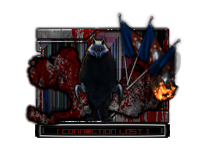
<style>
.page{position:relative;width:205px;height:147px;background:#ffffff}
.page>*{position:absolute;margin:0}
.t1{font:10.6px "P22DeStijlRegular";color:#620b0c}
</style>
<div class="page">
<p class="t1" style="left:57px;top:129px;width:92px;height:5px">{ Connection LOST ]</p>
</div>
